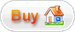
<style>
.page{position:relative;width:75px;height:32px}
.page>*{position:absolute;margin:0}
.t1{font:15px "Arial-BoldMT"}
</style>
<div class="page">
<p class="t1" style="left:11px;top:8px;width:28px;height:18px">Buy</p>
</div>
